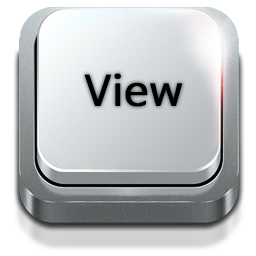
<style>
.page{position:relative;width:256px;height:256px}
.page>*{position:absolute;margin:0}
.t1{font:40.7px "NanumBarunGothic";letter-spacing:0.015em;color:#000000;font-weight:bold}
</style>
<div class="page">
<p class="t1" style="left:84px;top:73px;width:99px;height:34px">View</p>
</div>
